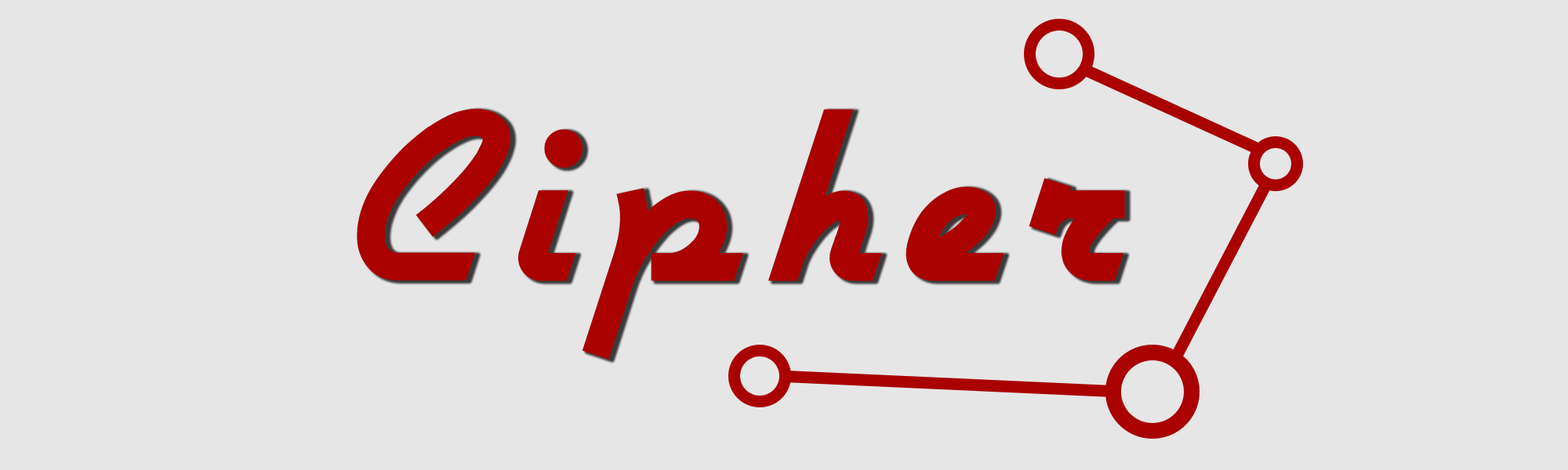
<style>
.page{position:relative;width:1568px;height:470px;background:#e6e6e6}
.page>*{position:absolute;margin:0}
.t1{font:278.8px "Airstream";letter-spacing:0.1em;color:#a90000}
</style>
<div class="page">
<p class="t1" style="left:357px;top:108px;width:768px;height:252px">Cipher</p>
</div>
